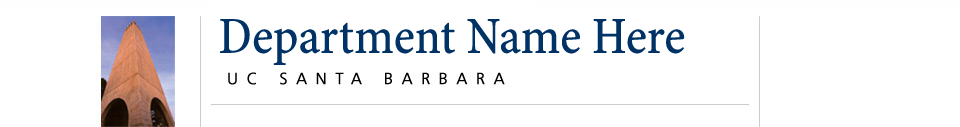
<style>
.page{position:relative;width:960px;height:127px;background:#ffffff}
.page>*{position:absolute;margin:0}
.t1{font:52px "MinionPro-Cn";letter-spacing:-0.019em;color:#003265;font-weight:bold}
</style>
<div class="page">
<p class="t1" style="left:220px;top:19px;width:465px;height:46px">Department Name Here</p>
</div>
